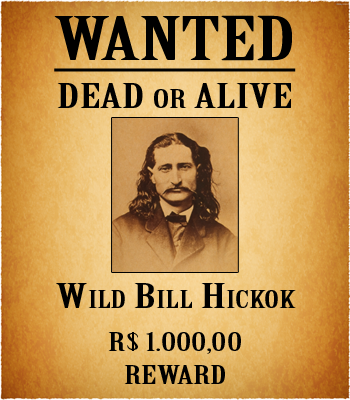
<style>
.page{position:relative;width:350px;height:400px}
.page>*{position:absolute;margin:0}
.t1{font:58.3px "BirchStd";color:#000000;text-transform:uppercase;text-decoration:underline;scale:2 1}
.t2{font:33.3px "BirchStd";color:#000000;text-transform:uppercase;scale:2 1}
.t3{font:25px "BirchStd";color:#000000;text-transform:uppercase;scale:2 1}
.t4{font:33.3px "BirchStd";color:#000000;font-variant:small-caps;scale:2 1}
</style>
<div class="page">
<p class="t1" style="left:54px;top:15px;width:242px;height:57px">Wanted</p>
<p class="t2" style="left:57px;top:83px;width:234px;height:25px">Dead <span class="t3">or</span> alive</p>
<p class="t4" style="left:56px;top:283px;width:240px;height:25px">Wild Bill Hickok</p>
<p class="t3" style="left:108px;top:332px;width:133px;height:22px">R$ 1.000,00</p>
<p class="t3" style="left:124px;top:365px;width:101px;height:19px">Reward</p>
</div>
